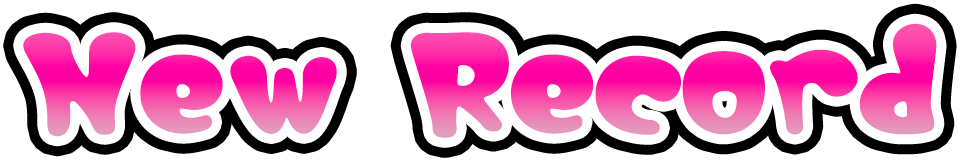
<style>
.page{position:relative;width:960px;height:160px;background:#ffffff}
.page>*{position:absolute;margin:0}
.t1{font:140.2px "Memoir-Round";letter-spacing:-0.075em;font-weight:bold}
</style>
<div class="page">
<p class="t1" style="left:23px;top:23px;width:914px;height:115px">New Record</p>
</div>
